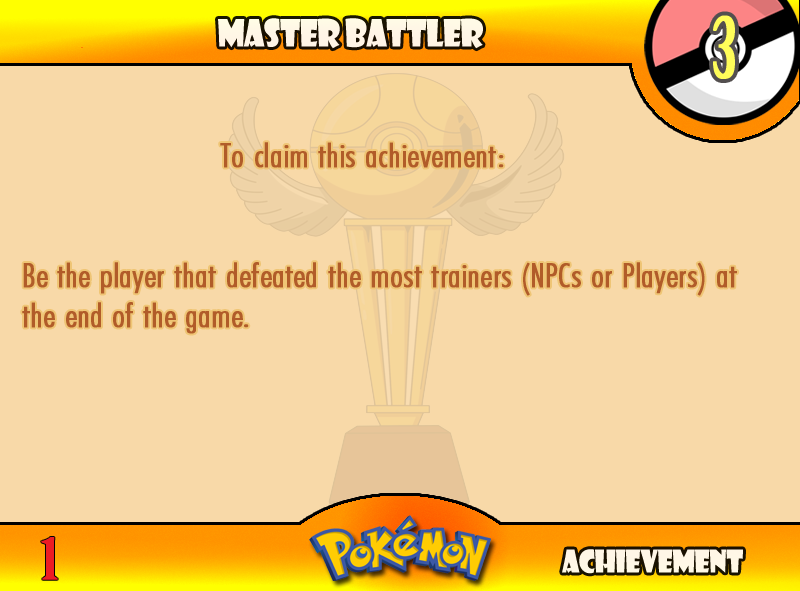
<style>
.page{position:relative;width:800px;height:591px;background:#f8d9a8}
.page>*{position:absolute;margin:0}
.t1{font:83.3px "BirchStd";letter-spacing:0.025em;color:#fffd59;font-weight:bold}
.t2{font:36.7px "ShowcardGothic-Reg";letter-spacing:-0.025em;color:#fff6e6;scale:0.91 1}
.t3{font:33.3px "FuturaCondensedBQ-Light";color:#b15c29;font-weight:bold;scale:1.08 1}
.t4{font:55.6px "BirchStd";color:#ed1c24;font-weight:bold;scale:1.5 1}
.t5{font:30.6px "ShowcardGothic-Reg";letter-spacing:-0.025em;color:#fff7e6;scale:0.91 1}
</style>
<div class="page">
<p class="t1" style="left:713px;top:15px;width:22px;height:64px">3</p>
<p class="t2" style="left:218px;top:18px;width:265px;height:31px">Master Battler</p>
<p class="t3" style="left:22px;top:142px;width:715px;height:192px">To claim this achievement:<br><br><br>Be the player that defeated the most trainers (NPCs or Players) at the end of the game.</p>
<p class="t4" style="left:41px;top:537px;width:17px;height:43px">1</p>
<p class="t5" style="left:562px;top:549px;width:181px;height:25px">Achievement</p>
</div>
